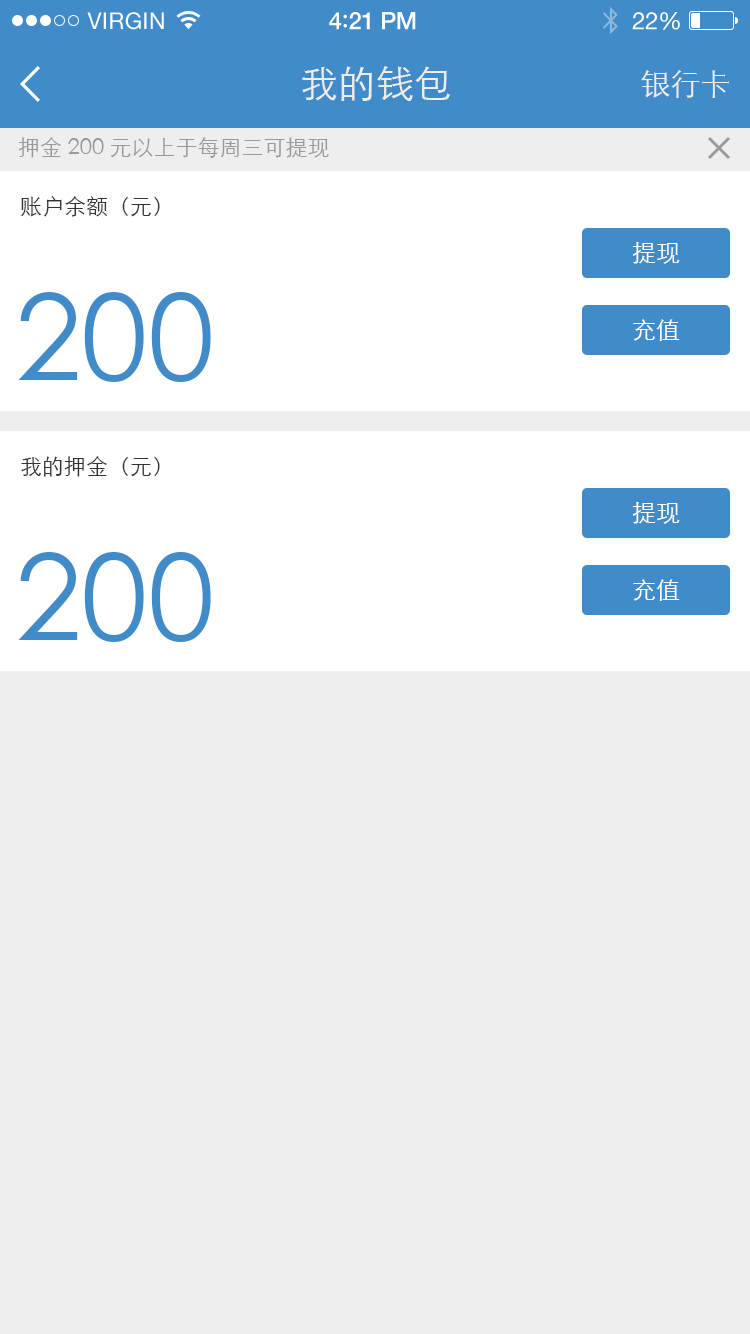
<style>
.page{position:relative;width:750px;height:1334px;background:#eeeeee}
.page>*{position:absolute;margin:0}
.t1{font:23px "HelveticaNeue";letter-spacing:0.02em;color:#ffffff}
.t2{font:24px "HelveticaNeue-Medium";letter-spacing:-0.02em;color:#ffffff}
.t3{font:26px "Avenir-Medium";letter-spacing:-0.02em;color:#ffffff}
.t4{font:24px "HelveticaNeue";letter-spacing:-0.02em;color:#ffffff}
.t5{font:38px "STXihei";color:#eeeeee}
.t6{font:30px "STXihei";color:#eeeeee}
.t7{font:22px "STXihei";color:#999999}
.t8{font:22px "STXihei";color:#333333}
.t9{font:24px "STXihei";color:#ffffff}
.t10{font:120px "STXihei";color:#418bc8}
</style>
<div class="page">
<p class="t1" style="left:87px;top:12px;width:77px;height:18px">VIRGIN</p>
<p class="t2" style="left:329px;top:12px;width:87px;height:18px">4<span class="t3">:</span>21 PM</p>
<p class="t4" style="left:632px;top:12px;width:48px;height:18px">22%</p>
<p class="t5" style="left:302px;top:66px;width:148px;height:35px">我的钱包</p>
<p class="t6" style="left:641px;top:70px;width:88px;height:28px">银行卡</p>
<p class="t7" style="left:18px;top:137px;width:311px;height:21px">押金200元以上于每周三可提现</p>
<p class="t8" style="left:21px;top:196px;width:139px;height:21px">账户余额（元）</p>
<p class="t9" style="left:632px;top:242px;width:48px;height:22px">提现</p>
<p class="t10" style="left:18px;top:292px;width:193px;height:90px">200</p>
<p class="t9" style="left:633px;top:319px;width:47px;height:22px">充值</p>
<p class="t8" style="left:21px;top:456px;width:139px;height:21px">我的押金（元）</p>
<p class="t9" style="left:632px;top:502px;width:48px;height:22px">提现</p>
<p class="t10" style="left:18px;top:552px;width:193px;height:90px">200</p>
<p class="t9" style="left:633px;top:579px;width:47px;height:22px">充值</p>
</div>
